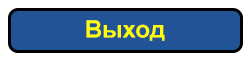
<style>
.page{position:relative;width:250px;height:60px;background:#225396}
.page>*{position:absolute;margin:0}
.t1{font:24px "Arial-BoldMT";color:#ffff00}
</style>
<div class="page">
<p class="t1" style="left:86px;top:20px;width:79px;height:21px">Выход</p>
</div>
